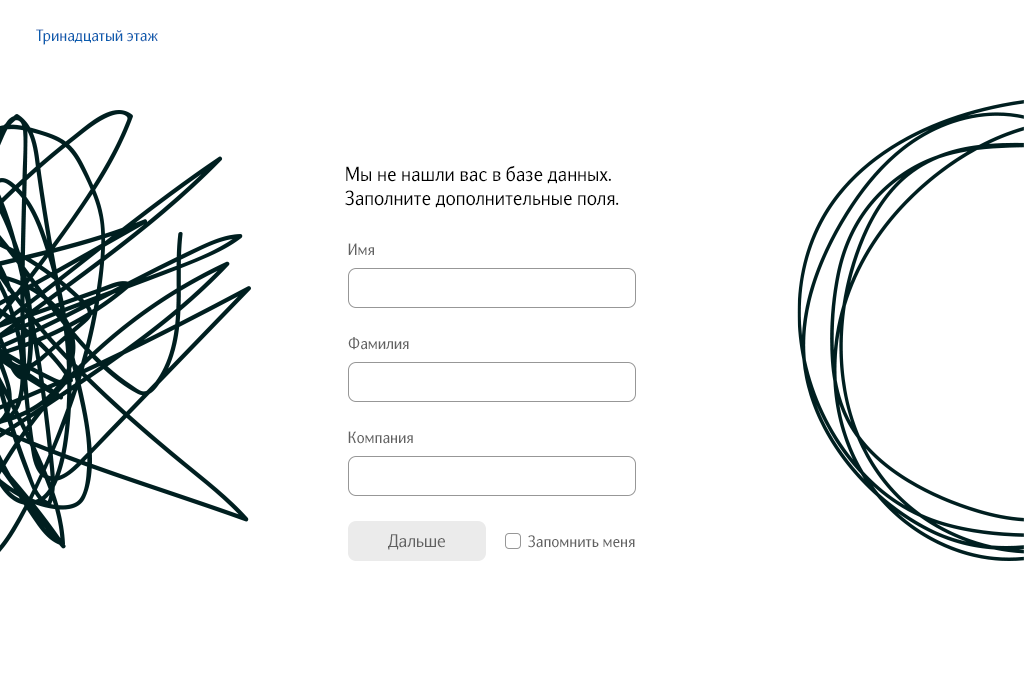
<style>
.page{position:relative;width:1024px;height:700px;background:#ffffff}
.page>*{position:absolute;margin:0}
.t1{font:16px "NatGrotesk-Regular";color:#0b5cae}
.t2{font:20px "NatGrotesk-Regular";color:#000000}
.t3{font:16px "NatGrotesk-Regular";color:#616161}
.t4{font:18px "NatGrotesk-Regular";color:#616161}
</style>
<div class="page">
<p class="t1" style="left:36px;top:29px;width:122px;height:16px">Тринадцатый этаж</p>
<p class="t2" style="left:345px;top:165px;width:274px;height:43px">Мы не нашли вас в базе данных. <br>Заполните дополнительные поля.</p>
<p class="t3" style="left:348px;top:243px;width:26px;height:12px">Имя</p>
<p class="t3" style="left:348px;top:337px;width:61px;height:13px">Фамилия</p>
<p class="t3" style="left:348px;top:431px;width:65px;height:13px">Компания</p>
<p class="t4" style="left:388px;top:534px;width:57px;height:16px">Дальше</p>
<p class="t3" style="left:528px;top:535px;width:107px;height:13px">Запомнить меня</p>
</div>
